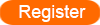
<style>
.page{position:relative;width:100px;height:25px;background:#ff6a00}
.page>*{position:absolute;margin:0}
.t1{font:18px "ArialMT";color:#ffffff}
</style>
<div class="page">
<p class="t1" style="left:19px;top:5px;width:67px;height:17px">Register</p>
</div>
